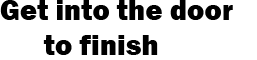
<style>
.page{position:relative;width:257px;height:60px;background:#ffffff}
.page>*{position:absolute;margin:0}
.t1{font:29.3px "FranklinGothic-Heavy";color:#000000}
</style>
<div class="page">
<p class="t1" style="left:0px;top:0px;width:233px;height:55px">Get into the door<br>      to finish</p>
</div>
